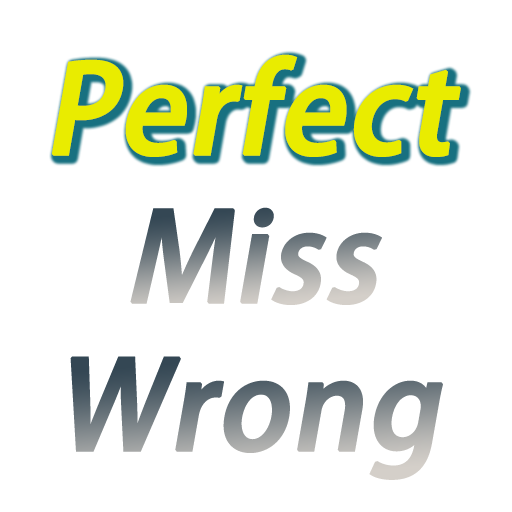
<style>
.page{position:relative;width:512px;height:512px;background:#ffffff}
.page>*{position:absolute;margin:0}
.t1{font:120px "AdobeHeitiStd-Regular";color:#e9ec00;font-weight:bold;font-style:italic}
.t2{font:120px "AdobeHeitiStd-Regular";font-weight:bold;font-style:italic}
</style>
<div class="page">
<p class="t1" style="left:52px;top:54px;width:409px;height:103px">Perfect</p>
<p class="t2" style="left:130px;top:207px;width:252px;height:98px">Miss</p>
<p class="t2" style="left:70px;top:356px;width:373px;height:124px">Wrong</p>
</div>
